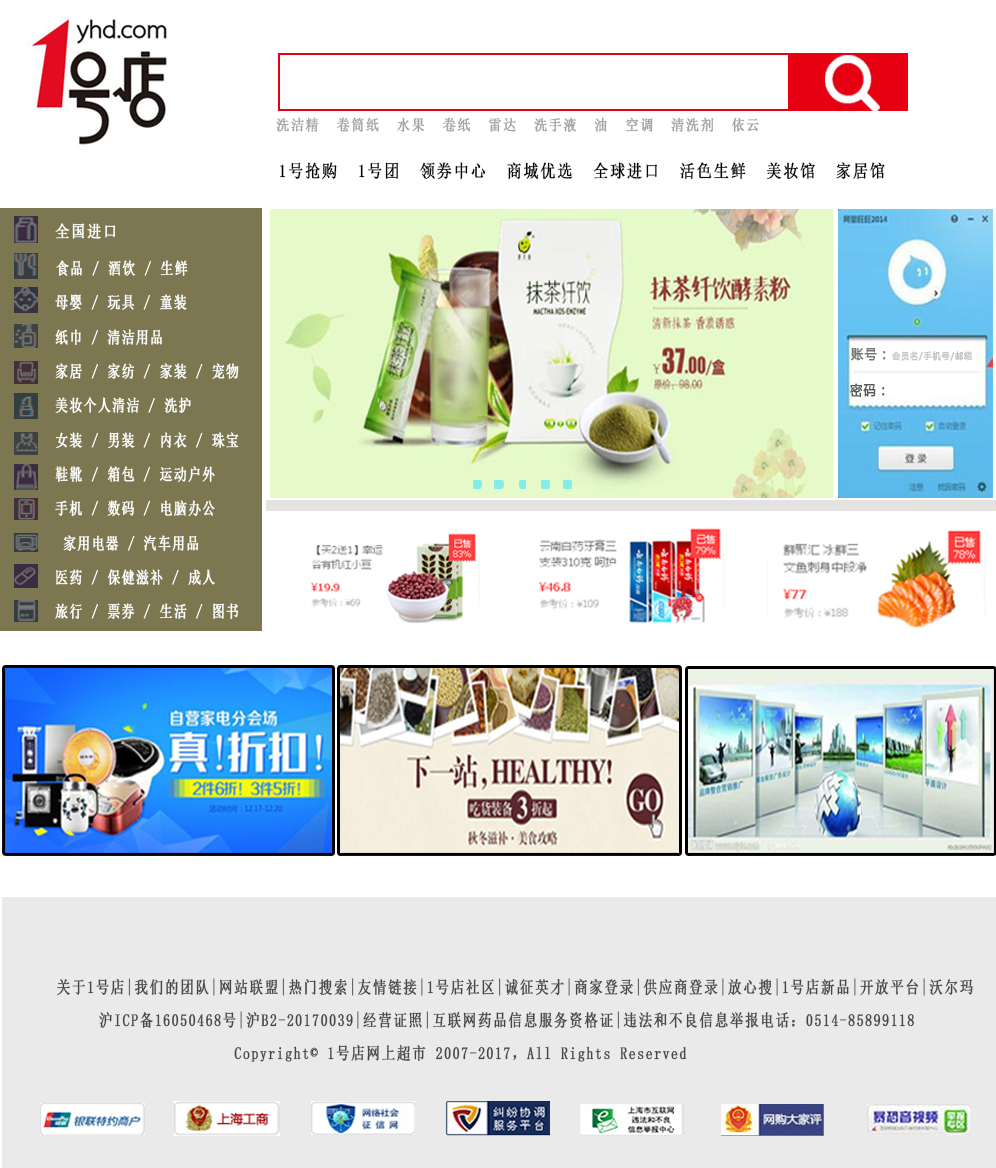
<style>
.page{position:relative;width:996px;height:1168px;background:#ffffff}
.page>*{position:absolute;margin:0}
.t1{font:15px "SimSun";letter-spacing:0.1em;color:#a6a1a1;font-weight:bold;scale:0.87 1}
.t2{font:17.8px "SimSun";letter-spacing:0.1em;color:#040404;font-weight:bold;scale:0.85 1}
.t3{font:16.6px/34.3px "SimSun";letter-spacing:0.1em;color:#fffffe;font-weight:bold;scale:0.76 1}
.t4{font:15.4px "SimSun";letter-spacing:0.1em;color:#fffffe;font-weight:bold;scale:0.84 1}
.t5{font:16.6px/34.3px "SimSun";letter-spacing:0.1em;color:#fffffe;font-weight:bold;scale:0.84 1}
.t6{font:13.7px "MicrosoftYaHei";letter-spacing:0.1em;color:#757572;font-weight:bold;scale:0.88 1}
.t7{font:13.7px "MicrosoftYaHei";letter-spacing:0.1em;color:#585854;font-weight:bold;scale:0.88 1}
.t8{font:17.1px/33px "SimSun";letter-spacing:0.1em;color:#484646;font-weight:bold;scale:0.79 1}
</style>
<div class="page">
<p class="t1" style="left:276px;top:117px;width:483px;height:15px">洗洁精  卷筒纸  水果  卷纸  雷达  洗手液  油  空调  清洗剂  依云</p>
<p class="t2" style="left:280px;top:162px;width:605px;height:18px">1号抢购  1号团  领券中心  商城优选  全球进口  活色生鲜  美妆馆  家居馆</p>
<p class="t3" style="left:55px;top:223px;width:184px;height:397px"><span class="t4"> </span><span class="t5">全国进口<br> </span>食品 / 酒饮 / 生鲜<br> 母婴 / 玩具 / 童装<br> 纸巾 / 清洁用品<br> 家居 / 家纺 / 家装 / 宠物<br> 美妆个人清洁 / 洗护<br> 女装 / 男装 / 内衣 / 珠宝<br> 鞋靴 / 箱包 / 运动户外<br> 手机 / 数码 / 电脑办公<br>  家用电器 / 汽车用品<br> 医药 / 保健滋补 / 成人<br> 旅行 / 票券 / 生活 / 图书</p>
<p class="t6" style="left:851px;top:348px;width:35px;height:13px">账号：</p>
<p class="t7" style="left:850px;top:383px;width:35px;height:15px">密码：</p>
<p class="t8" style="left:57px;top:978px;width:916px;height:84px">关于1号店|我们的团队|网站联盟|热门搜索|友情链接|1号店社区|诚征英才|商家登录|供应商登录|放心搜|1号店新品|开放平台|沃尔玛<br>     沪ICP备16050468号|沪B2-20170039|经营证照|互联网药品信息服务资格证|违法和不良信息举报电话：0514-85899118<br>                     Copyright© 1号店网上超市 2007-2017，All Rights Reserved</p>
</div>
